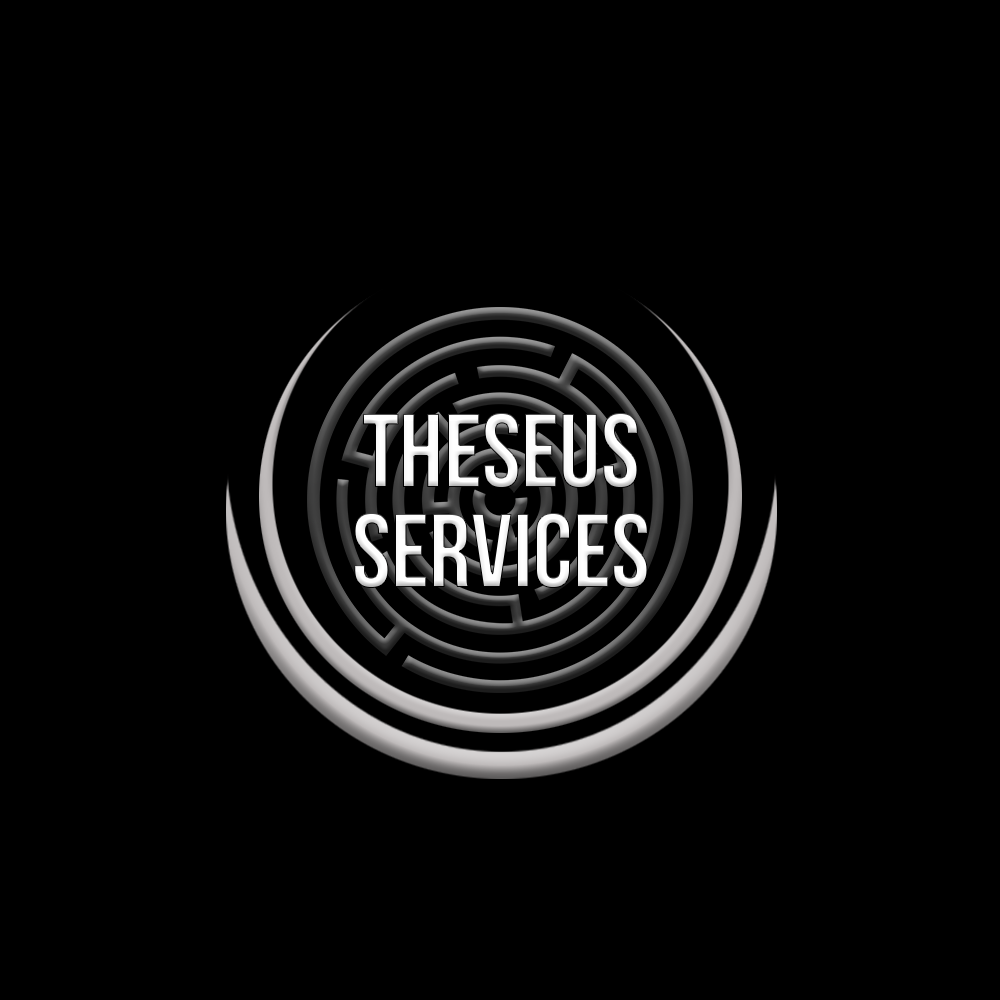
<style>
.page{position:relative;width:1000px;height:1000px;background:#000000}
.page>*{position:absolute;margin:0}
.t1{font:104.2px/100px "BebasNeue";color:#ffffff}
</style>
<div class="page">
<p class="t1" style="left:354px;top:412px;width:294px;height:177px;text-align:center">THESEUS<br>SERVICES</p>
</div>
